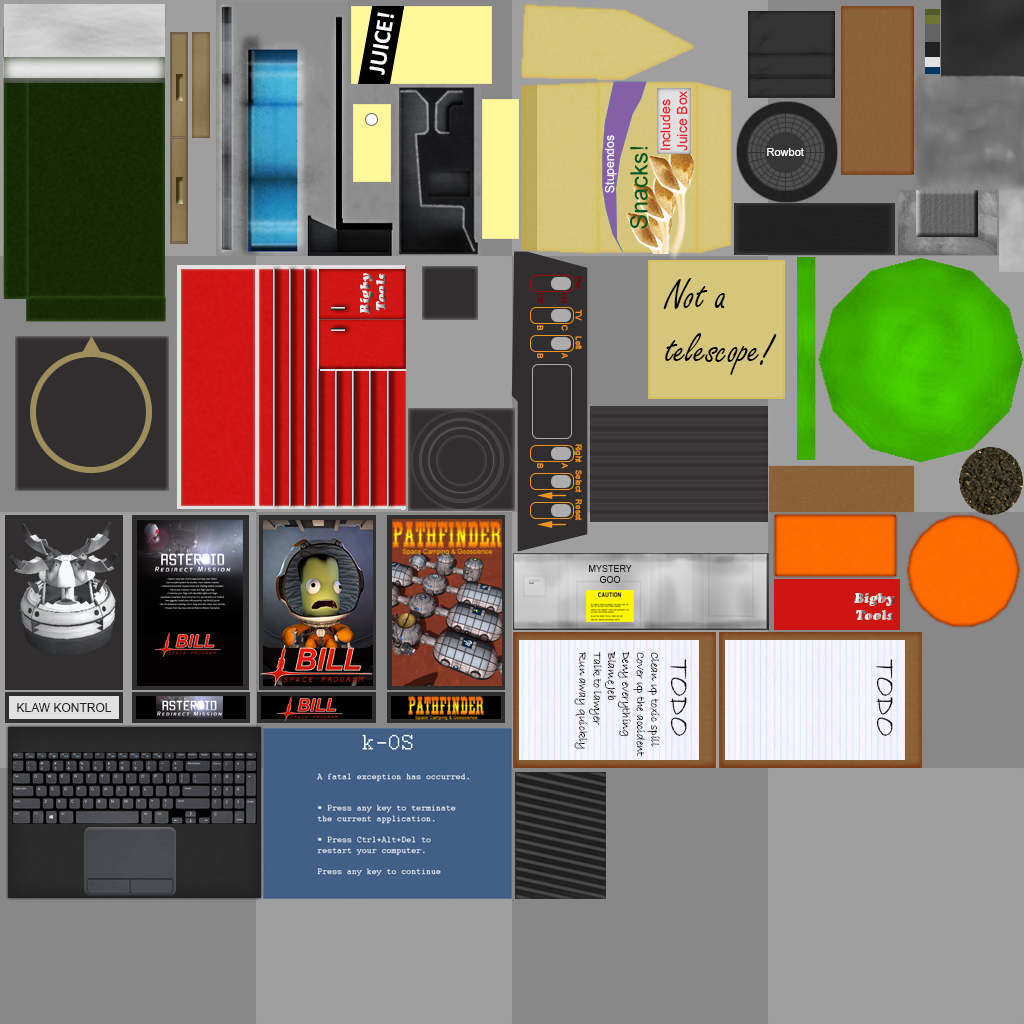
<style>
.page{position:relative;width:1024px;height:1024px}
.page>*{position:absolute;margin:0}
.t1{font:24px "Calibri-Bold";color:#ffffff}
.t2{font:14px "ArialMT";color:#ed1c24}
.t3{font:12px "ArialMT";color:#ffffff}
.t4{font:24px "ArialMT";color:#005826}
.t5{font:11px "ArialMT";color:#ffffff}
.t6{font:14px "CooperBlackStd-Italic"}
.t7{font:8px "ArialMT";color:#790000}
.t8{font:45.3px "FreestyleScript-Regular";color:#000000;scale:0.92 1}
.t9{font:8px "ArialMT";color:#f7941d}
.t10{font:9px "ArialMT";color:#212121}
.t11{font:12px "BradleyHandITC";color:#000000}
.t12{font:30px "BradleyHandITC";color:#000000}
.t13{font:12px "ArialMT";color:#252424}
</style>
<div class="page">
<p class="t1" style="left:369px;top:12px;width:25px;height:63px;rotate:-81deg">JUICE!</p>
<p class="t2" style="left:660px;top:91px;width:28px;height:60px;rotate:-90deg">Includes<br>Juice Box</p>
<p class="t3" style="left:604px;top:135px;width:13px;height:58px;rotate:-90deg">Stupendos</p>
<p class="t4" style="left:629px;top:146px;width:19px;height:83px;rotate:-90deg">Snacks!</p>
<p class="t5" style="left:767px;top:148px;width:37px;height:8px">Rowbot</p>
<p class="t6" style="left:360px;top:273px;width:26px;height:41px;text-align:center;rotate:-90deg">Bigby<br>Tools</p>
<p class="t7" style="left:575px;top:276px;width:7px;height:14px;rotate:90deg">Pwr</p>
<p class="t8" style="left:663px;top:278px;width:114px;height:97px">Not a<br>telescope!</p>
<p class="t7" style="left:537px;top:293px;width:7px;height:11px;rotate:90deg">Off</p>
<p class="t7" style="left:561px;top:293px;width:7px;height:11px;rotate:90deg">On</p>
<p class="t9" style="left:575px;top:309px;width:7px;height:12px;rotate:90deg">TV</p>
<p class="t9" style="left:537px;top:325px;width:7px;height:6px;rotate:90deg">B</p>
<p class="t9" style="left:561px;top:325px;width:7px;height:6px;rotate:90deg">C</p>
<p class="t9" style="left:575px;top:336px;width:7px;height:14px;rotate:90deg">Left</p>
<p class="t9" style="left:537px;top:353px;width:7px;height:6px;rotate:90deg">B</p>
<p class="t9" style="left:561px;top:353px;width:7px;height:6px;rotate:90deg">A</p>
<p class="t9" style="left:574px;top:444px;width:8px;height:19px;rotate:90deg">Right</p>
<p class="t9" style="left:537px;top:463px;width:7px;height:6px;rotate:90deg">B</p>
<p class="t9" style="left:561px;top:463px;width:7px;height:6px;rotate:90deg">A</p>
<p class="t9" style="left:575px;top:470px;width:7px;height:23px;rotate:90deg">Select</p>
<p class="t9" style="left:575px;top:499px;width:7px;height:22px;rotate:90deg">Reset</p>
<p class="t10" style="left:589px;top:565px;width:43px;height:18px;text-align:center">MYSTERY<br>GOO</p>
<p class="t6" style="left:854px;top:593px;width:41px;height:27px;text-align:center">Bigby<br>Tools</p>
<p class="t11" style="left:574px;top:651px;width:86px;height:106px;rotate:90deg">Clean up toxic spill<br>Cover up the accident<br>Deny everything<br>Blame Jeb<br>Talk to lawyer<br>Run away quickly</p>
<p class="t12" style="left:670px;top:659px;width:17px;height:77px;rotate:90deg">TODO</p>
<p class="t12" style="left:876px;top:659px;width:17px;height:77px;rotate:90deg">TODO</p>
<p class="t13" style="left:17px;top:703px;width:95px;height:9px">KLAW KONTROL</p>
</div>
